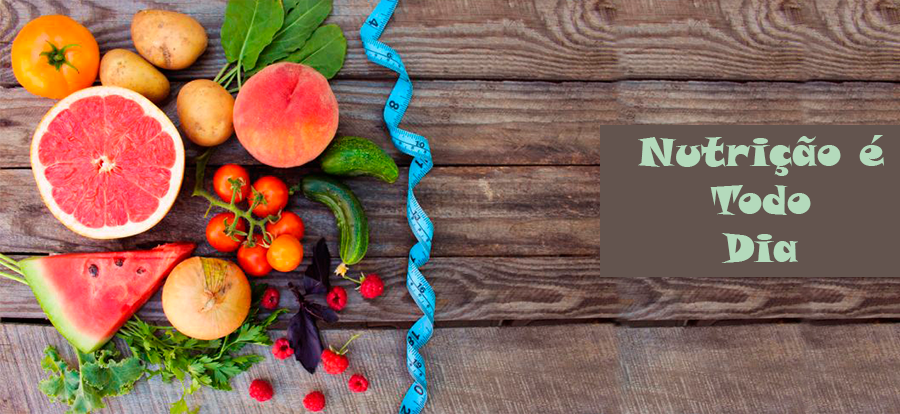
<style>
.page{position:relative;width:900px;height:414px}
.page>*{position:absolute;margin:0}
.t1{font:40px "SnapITC-Regular";color:#b4dabc}
</style>
<div class="page">
<p class="t1" style="left:638px;top:135px;width:246px;height:128px;text-align:center">Nutrição é<br>Todo<br>Dia</p>
</div>
